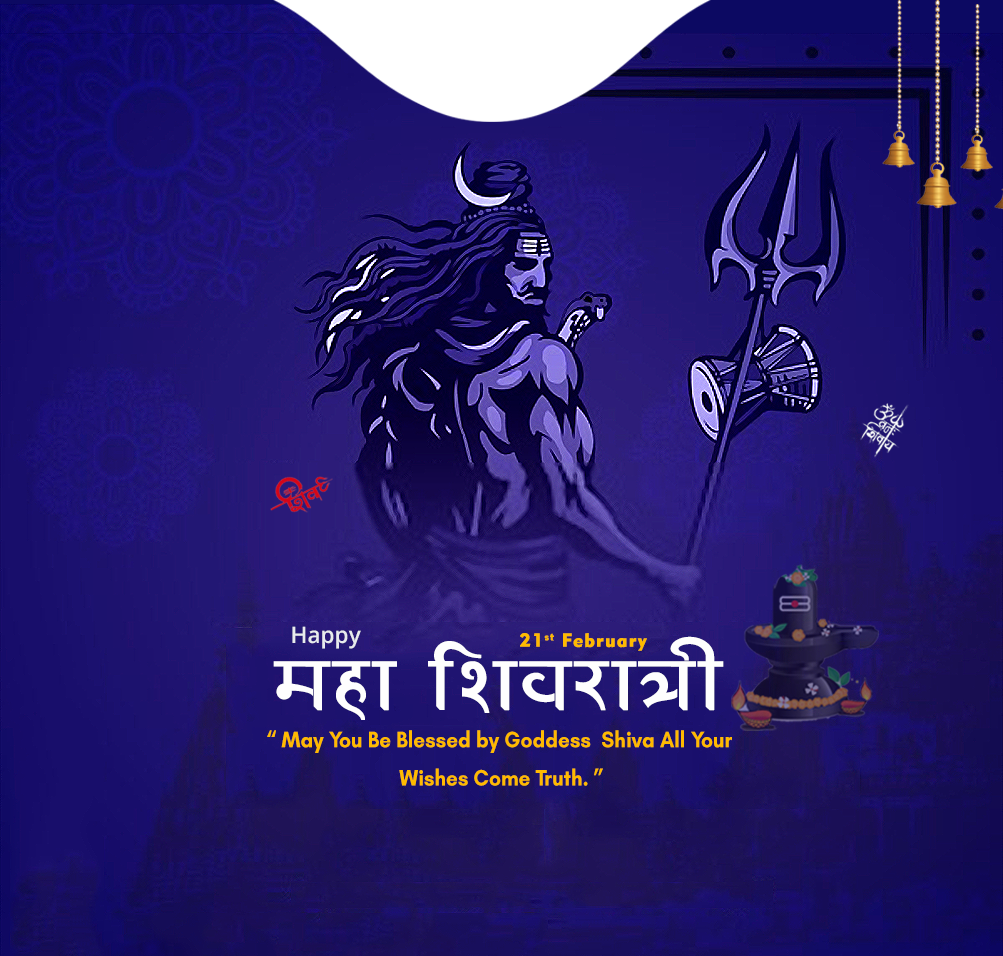
<style>
.page{position:relative;width:1003px;height:956px}
.page>*{position:absolute;margin:0}
.t1{font:22.7px "OpenSans-Semibold";color:#e8ebed}
.t2{font:90.4px "EKLH-07";color:#fefefe;font-weight:bold}
.t3{font:18.7px "Geometric415BT-BlackA";letter-spacing:0.05em;color:#ffba00;font-weight:bold}
.t4{font:22.7px/38.2px "GlacialIndifference-Bold";color:#ffba00;scale:0.91 1}
</style>
<div class="page">
<p class="t1" style="left:292px;top:626px;width:69px;height:23px">Happy</p>
<p class="t2" style="left:273px;top:636px;width:451px;height:84px">btnt rNtJtht*te</p>
<p class="t3" style="left:520px;top:633px;width:127px;height:18px">21st February</p>
<p class="t4" style="left:267px;top:730px;width:465px;height:56px;text-align:center">“ May You Be Blessed by Goddess  Shiva All Your <br>Wishes Come Truth. ”</p>
</div>
